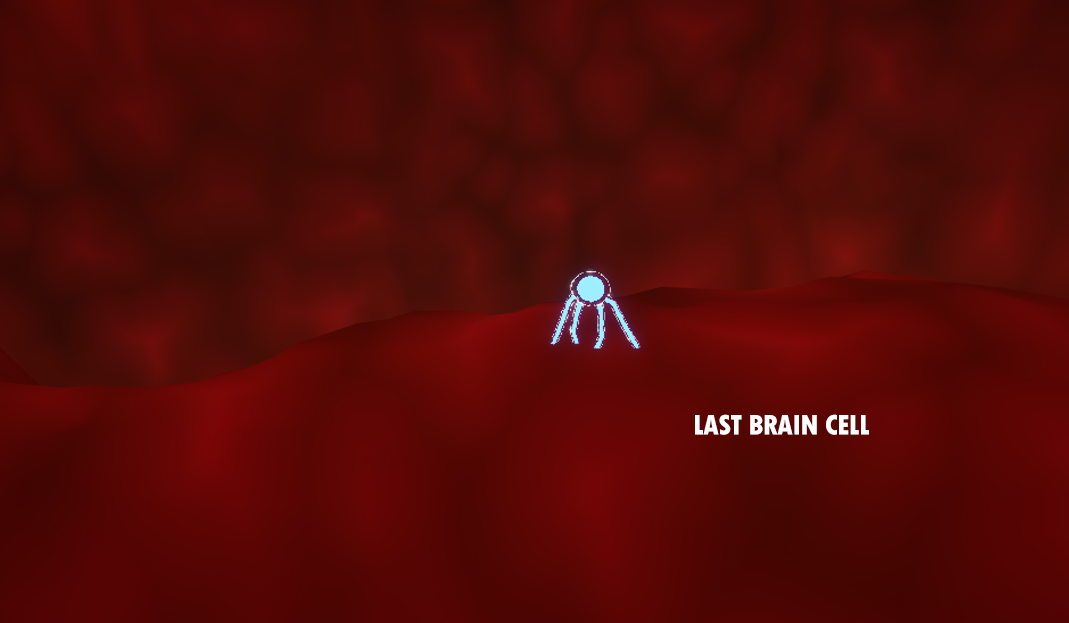
<style>
.page{position:relative;width:1069px;height:623px}
.page>*{position:absolute;margin:0}
.t1{font:29.9px "TwCenMT-CondensedExtraBold";letter-spacing:-0.025em;color:#ffffff;text-transform:uppercase}
</style>
<div class="page">
<p class="t1" style="left:695px;top:414px;width:174px;height:21px">LAST BRAIN CELL</p>
</div>
